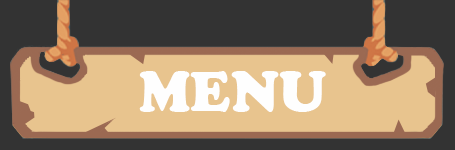
<style>
.page{position:relative;width:455px;height:150px;background:#333333}
.page>*{position:absolute;margin:0}
.t1{font:58.3px "CooperBlack";color:#fefefe}
</style>
<div class="page">
<p class="t1" style="left:139px;top:71px;width:187px;height:41px">MENU</p>
</div>
